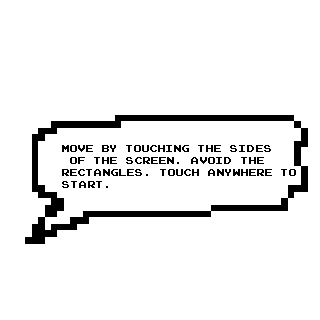
<style>
.page{position:relative;width:320px;height:320px;background:#ffffff}
.page>*{position:absolute;margin:0}
.t1{font:10px "JoystixMonospace-Regular";color:#000000}
</style>
<div class="page">
<p class="t1" style="left:62px;top:145px;width:234px;height:43px">Move by touching the sides<br> of the screen. Avoid the <br>rectangles. Touch anywhere to <br>start.</p>
</div>
